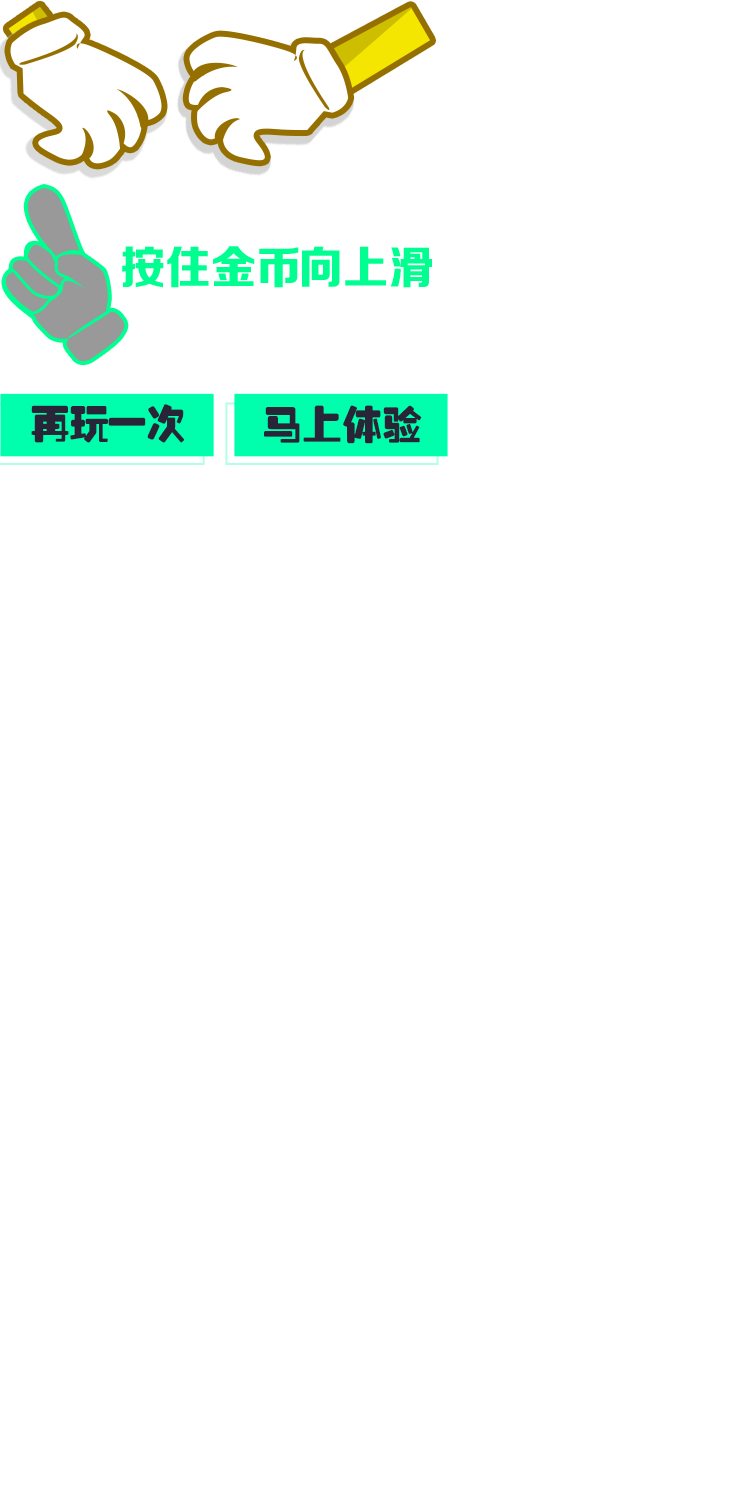
<style>
.page{position:relative;width:750px;height:1500px;background:#ffffff}
.page>*{position:absolute;margin:0}
.t1{font:40px "Tensentype-JinZhuanHeiJ";letter-spacing:-0.038em;color:#272537}
.t2{font:40px "Tensentype-JinZhuanHeiJ";color:#272537}
</style>
<div class="page">
<p class="t1" style="left:31px;top:404px;width:154px;height:39px">再玩一次</p>
<p class="t2" style="left:264px;top:405px;width:158px;height:39px">马上体验</p>
</div>
